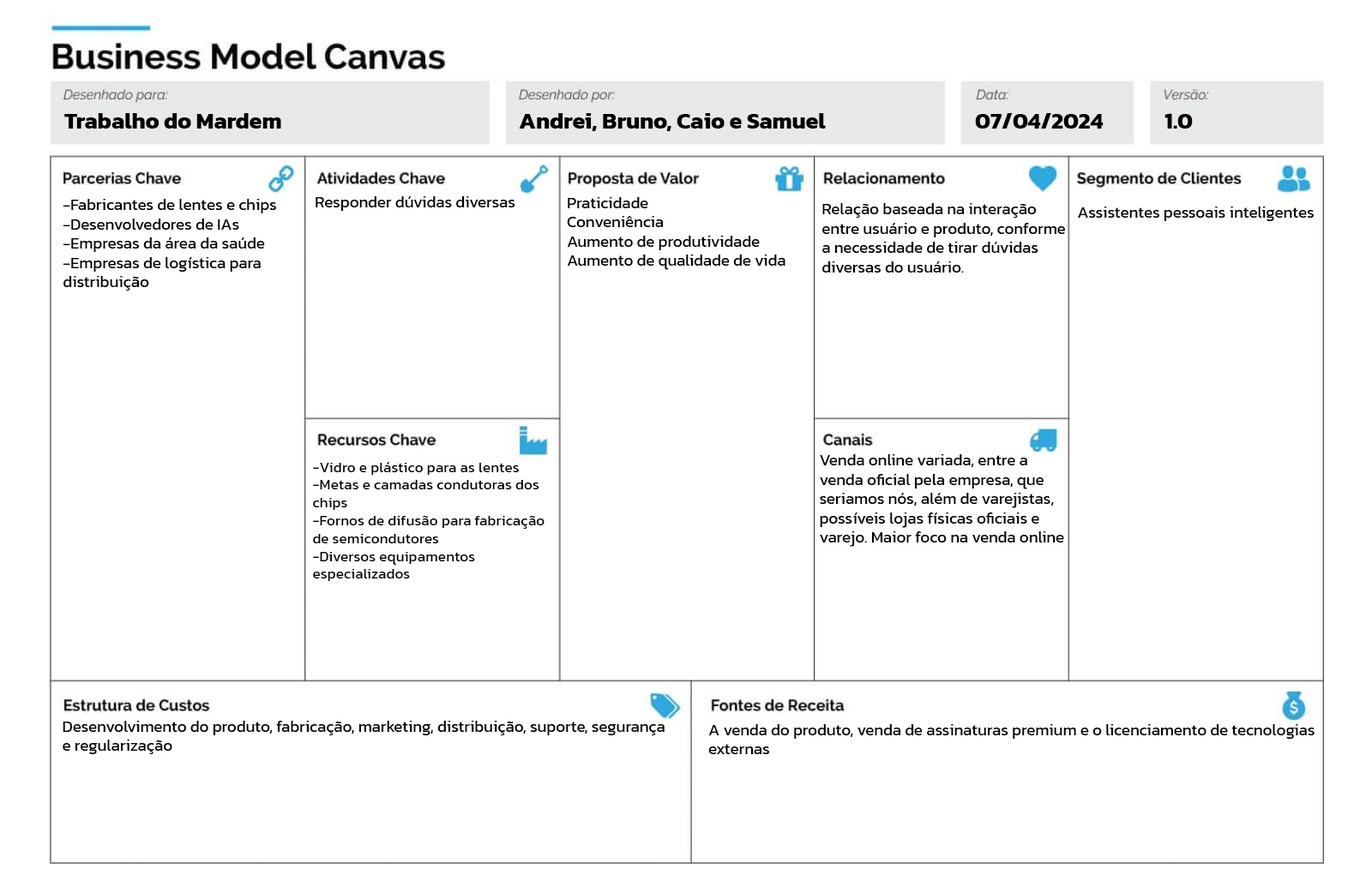
<style>
.page{position:relative;width:1372px;height:869px;background:#ffffff}
.page>*{position:absolute;margin:0}
.t1{font:22.9px "Kanit-Bold";color:#000000}
.t2{font:16px "Kanit-Regular";color:#000000}
.t3{font:14.9px "Kanit-Regular";color:#000000}
</style>
<div class="page">
<p class="t1" style="left:64px;top:113px;width:217px;height:16px">Trabalho do Mardem</p>
<p class="t1" style="left:519px;top:113px;width:307px;height:18px">Andrei, Bruno, Caio e Samuel</p>
<p class="t1" style="left:975px;top:113px;width:128px;height:16px">07/04/2024</p>
<p class="t1" style="left:1164px;top:113px;width:29px;height:16px">1.0</p>
<p class="t2" style="left:315px;top:196px;width:200px;height:15px">Responder dúvidas diversas</p>
<p class="t2" style="left:567px;top:197px;width:218px;height:73px">Praticidade<br>Conveniência<br>Aumento de produtividade<br>Aumento de qualidade de vida</p>
<p class="t2" style="left:63px;top:199px;width:214px;height:92px">-Fabricantes de lentes e chips<br>-Desenvolvedores de IAs<br>-Empresas da área da saúde<br>-Empresas de logística para<br>distribuição</p>
<p class="t2" style="left:822px;top:203px;width:243px;height:70px">Relação baseada na interação<br>entre usuário e produto, conforme<br>a necessidade de tirar dúvidas<br>diversas do usuário.</p>
<p class="t2" style="left:1078px;top:207px;width:236px;height:14px">Assistentes pessoais inteligentes</p>
<p class="t2" style="left:820px;top:454px;width:244px;height:93px">Venda online variada, entre a<br>venda oficial pela empresa, que<br>seriamos nós, além de varejistas,<br>possíveis lojas físicas oficiais e<br>varejo. Maior foco na venda online</p>
<p class="t3" style="left:313px;top:462px;width:231px;height:119px">-Vidro e plástico para as lentes<br>-Metas e camadas condutoras dos<br>chips<br>-Fornos de difusão para fabricação<br>de semicondutores<br>-Diversos equipamentos<br>especializados</p>
<p class="t2" style="left:63px;top:721px;width:601px;height:33px">Desenvolvimento do produto, fabricação, marketing, distribuição, suporte, segurança<br>e regularização</p>
<p class="t2" style="left:708px;top:724px;width:606px;height:30px">A venda do produto, venda de assinaturas premium e o licenciamento de tecnologias<br>externas</p>
</div>
